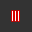
<style>
.page{position:relative;width:32px;height:32px;background:#333333}
.page>*{position:absolute;margin:0}
.t1{font:14px "BerlinSansFB-Reg";color:#ffffff}
</style>
<div class="page">
<p class="t1" style="left:12px;top:11px;width:7px;height:10px">III</p>
</div>
